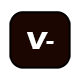
<style>
.page{position:relative;width:80px;height:80px;background:#ffffff}
.page>*{position:absolute;margin:0}
.t1{font:25.9px "ErasITC-Bold";color:#ffffff}
</style>
<div class="page">
<p class="t1" style="left:27px;top:32px;width:27px;height:17px">V-</p>
</div>
